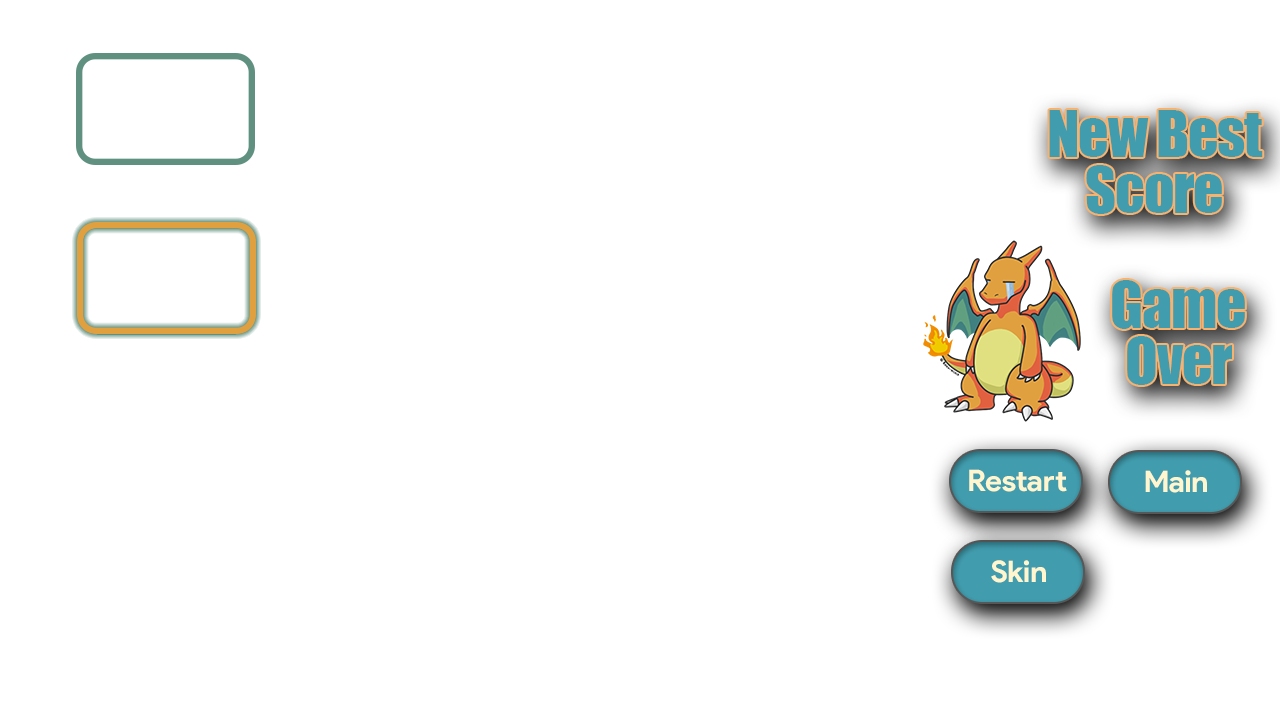
<style>
.page{position:relative;width:1280px;height:720px;background:#ffffff}
.page>*{position:absolute;margin:0}
.t1{font:60px/56px "Impact";letter-spacing:-0.02em;color:#419dae}
.t2{font:29.7px "ProductSans-Bold";letter-spacing:-0.02em;color:#fff5cf}
</style>
<div class="page">
<p class="t1" style="left:1049px;top:110px;width:214px;height:104px;text-align:center">New Best<br>Score</p>
<p class="t1" style="left:1112px;top:280px;width:133px;height:105px;text-align:center">Game<br>Over</p>
<p class="t2" style="left:969px;top:469px;width:98px;height:23px">Restart</p>
<p class="t2" style="left:1145px;top:470px;width:62px;height:23px">Main</p>
<p class="t2" style="left:991px;top:560px;width:55px;height:23px">Skin</p>
</div>
